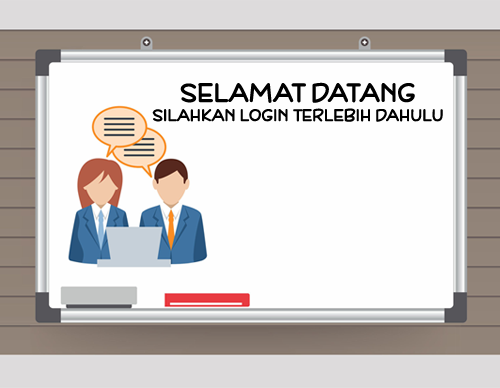
<style>
.page{position:relative;width:500px;height:388px;background:#fefefe}
.page>*{position:absolute;margin:0}
.t1{font:15.9px "DeFonarts";color:#000000}
.t2{font:25px "DeFonarts";color:#000000}
</style>
<div class="page">
<p class="t1" style="left:152px;top:82px;width:291px;height:40px;text-align:center"><span class="t2">SELAMAT DATANG<br></span>SILAHKAN LOGIN TERLEBIH DAHULU</p>
</div>
